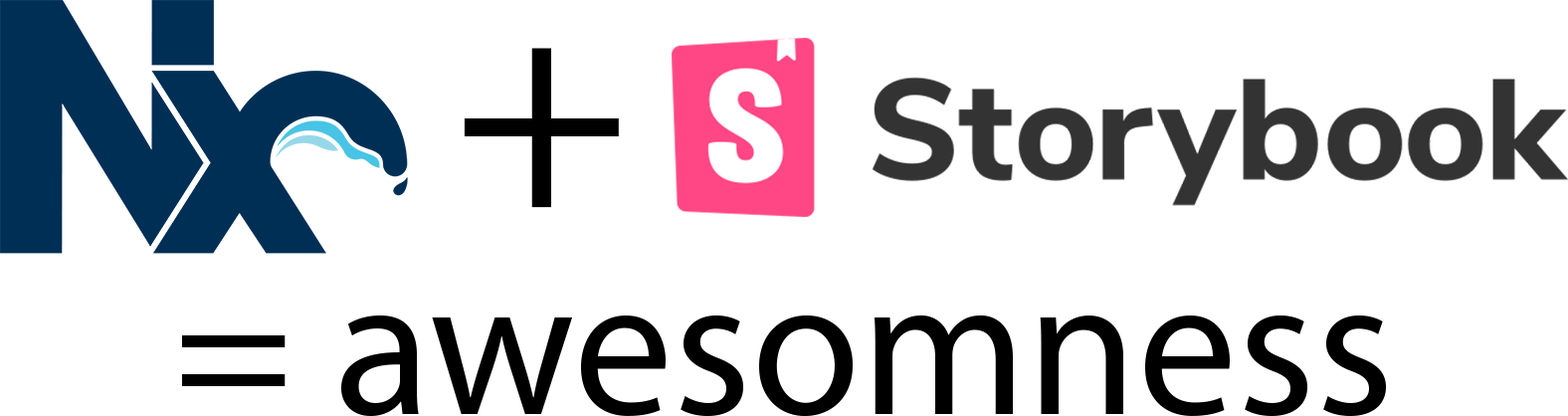
<style>
.page{position:relative;width:1568px;height:416px;background:#ffffff}
.page>*{position:absolute;margin:0}
.t1{font:298.5px "MyriadPro-Regular";color:#000000}
.t2{font:199px "MyriadPro-Regular";color:#000000}
</style>
<div class="page">
<p class="t1" style="left:464px;top:48px;width:155px;height:160px">+</p>
<p class="t2" style="left:182px;top:314px;width:1204px;height:102px">= awesomness</p>
</div>
